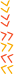
<style>
.page{position:relative;width:14px;height:75px;background:#ffffff}
.page>*{position:absolute;margin:0}
.t1{font:16px "ThrowMyHandsUpintheAir";color:#f8ab01;text-transform:uppercase}
.t2{font:16px "ThrowMyHandsUpintheAir";color:#f55029;text-transform:uppercase}
</style>
<div class="page">
<p class="t1" style="left:0px;top:0px;width:10px;height:13px;rotate:90deg">&gt;&gt;</p>
<p class="t2" style="left:0px;top:14px;width:10px;height:13px;rotate:90deg">&gt;&gt;</p>
<p class="t2" style="left:0px;top:31px;width:14px;height:10px">&gt;&gt;</p>
<p class="t2" style="left:0px;top:54px;width:14px;height:9px;rotate:-180deg">&gt;&gt;</p>
<p class="t1" style="left:0px;top:42px;width:14px;height:10px">&gt;&gt;</p>
<p class="t1" style="left:0px;top:65px;width:14px;height:9px;rotate:-180deg">&gt;&gt;</p>
</div>
